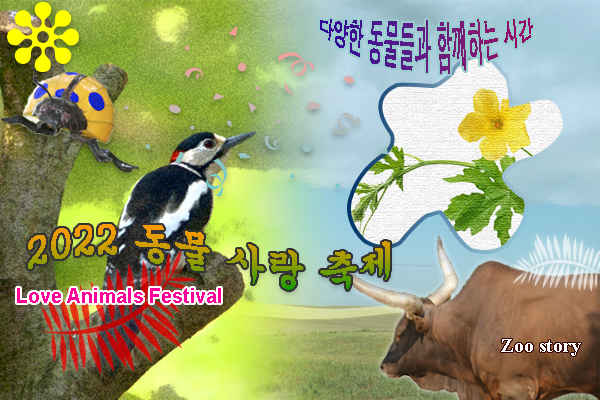
<style>
.page{position:relative;width:600px;height:400px}
.page>*{position:absolute;margin:0}
.t1{font:15.2px "Dotum"}
.t2{font:39.9px "Gungsuh"}
.t3{font:19.7px "Arial-BoldMT";color:#ff0099}
.t4{font:19.7px "TimesNewRomanPS-BoldMT";color:#ffffff}
</style>
<div class="page">
<p class="t1" style="left:320px;top:18px;width:213px;height:56px">다양한 동물들과 함께하는 시간</p>
<p class="t2" style="left:28px;top:224px;width:362px;height:66px">2022 동물 사랑 축제</p>
<p class="t3" style="left:17px;top:288px;width:204px;height:15px">Love Animals Festival</p>
<p class="t4" style="left:501px;top:339px;width:80px;height:17px">Zoo story</p>
</div>
